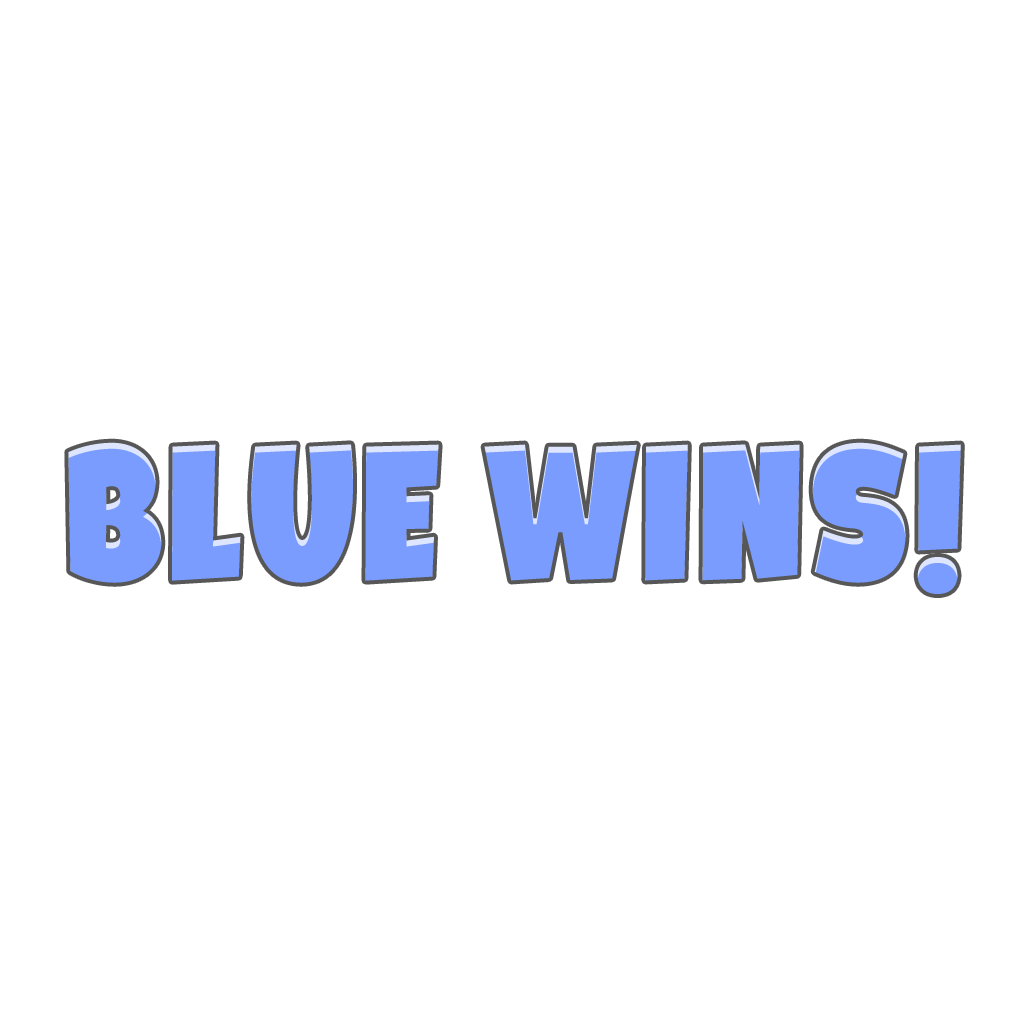
<style>
.page{position:relative;width:1024px;height:1024px;background:#ffffff}
.page>*{position:absolute;margin:0}
.t1{font:200px "Galpon-Black";color:#7a9cff}
</style>
<div class="page">
<p class="t1" style="left:68px;top:442px;width:893px;height:152px">Blue Wins!</p>
</div>
